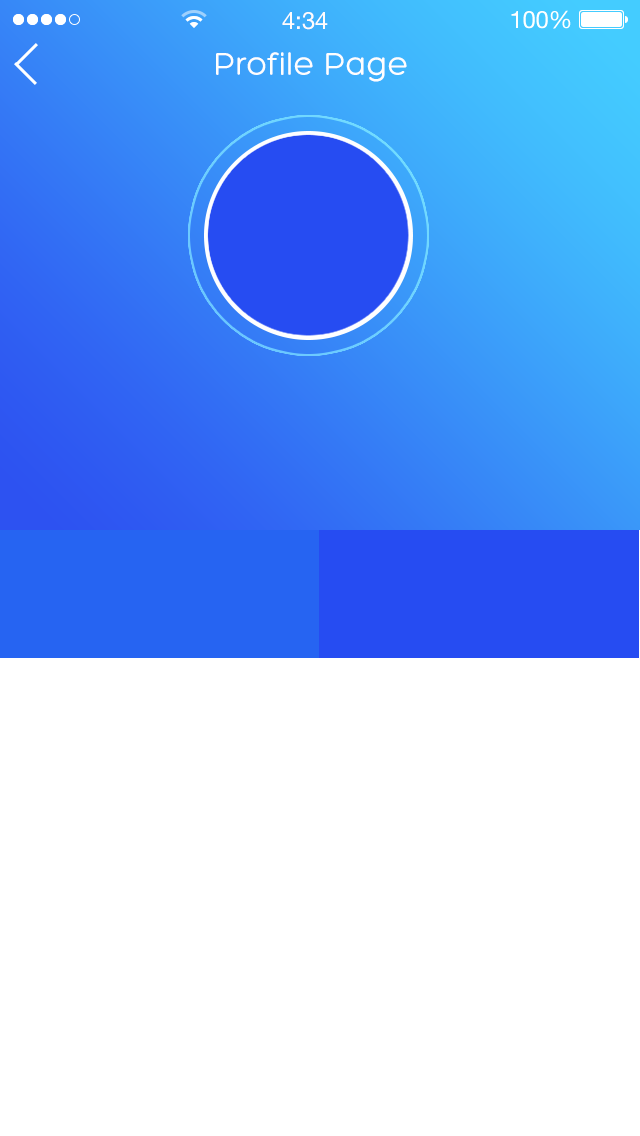
<style>
.page{position:relative;width:640px;height:1136px;background:#ffffff}
.page>*{position:absolute;margin:0}
.t1{font:24px "HelveticaNeue";color:#fffcfc}
.t2{font:34px "Hero";color:#fefefe}
</style>
<div class="page">
<p class="t1" style="left:282px;top:12px;width:46px;height:18px">4:34</p>
<p class="t2" style="left:216px;top:52px;width:191px;height:30px">Profile Page</p>
</div>
